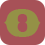
<style>
.page{position:relative;width:45px;height:45px;background:#a75157}
.page>*{position:absolute;margin:0}
.t1{font:50px "Saddlebag-Black";color:#949146}
</style>
<div class="page">
<p class="t1" style="left:4px;top:9px;width:37px;height:28px">0</p>
</div>
